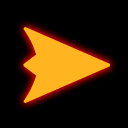
<style>
.page{position:relative;width:128px;height:128px;background:#000000}
.page>*{position:absolute;margin:0}
.t1{font:85px "AppleGothic";color:#ffb420;font-weight:bold}
</style>
<div class="page">
<p class="t1" style="left:23px;top:27px;width:87px;height:77px">➤</p>
</div>
